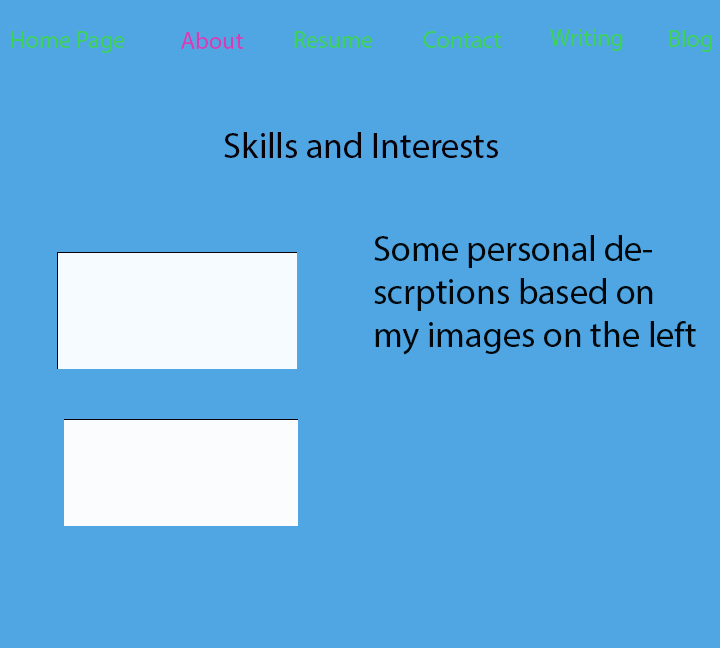
<style>
.page{position:relative;width:720px;height:648px;background:#4fa6e3}
.page>*{position:absolute;margin:0}
.t1{font:24px "MyriadPro-Regular";color:#3ed15a}
.t2{font:24px "MyriadPro-Regular";color:#d13eb7}
.t3{font:36px "MyriadPro-Regular";color:#090108}
.t4{font:36px "MyriadPro-Regular";color:#010609}
</style>
<div class="page">
<p class="t1" style="left:550px;top:29px;width:73px;height:22px">Writing</p>
<p class="t1" style="left:669px;top:30px;width:43px;height:22px">Blog</p>
<p class="t1" style="left:11px;top:31px;width:114px;height:22px">Home Page</p>
<p class="t2" style="left:181px;top:32px;width:62px;height:17px">About</p>
<p class="t1" style="left:294px;top:31px;width:79px;height:17px">Resume</p>
<p class="t1" style="left:423px;top:31px;width:78px;height:17px">Contact</p>
<p class="t3" style="left:224px;top:132px;width:274px;height:26px">Skills and Interests</p>
<p class="t4" style="left:374px;top:235px;width:322px;height:120px">Some personal descrptions based on my images on the left</p>
</div>
